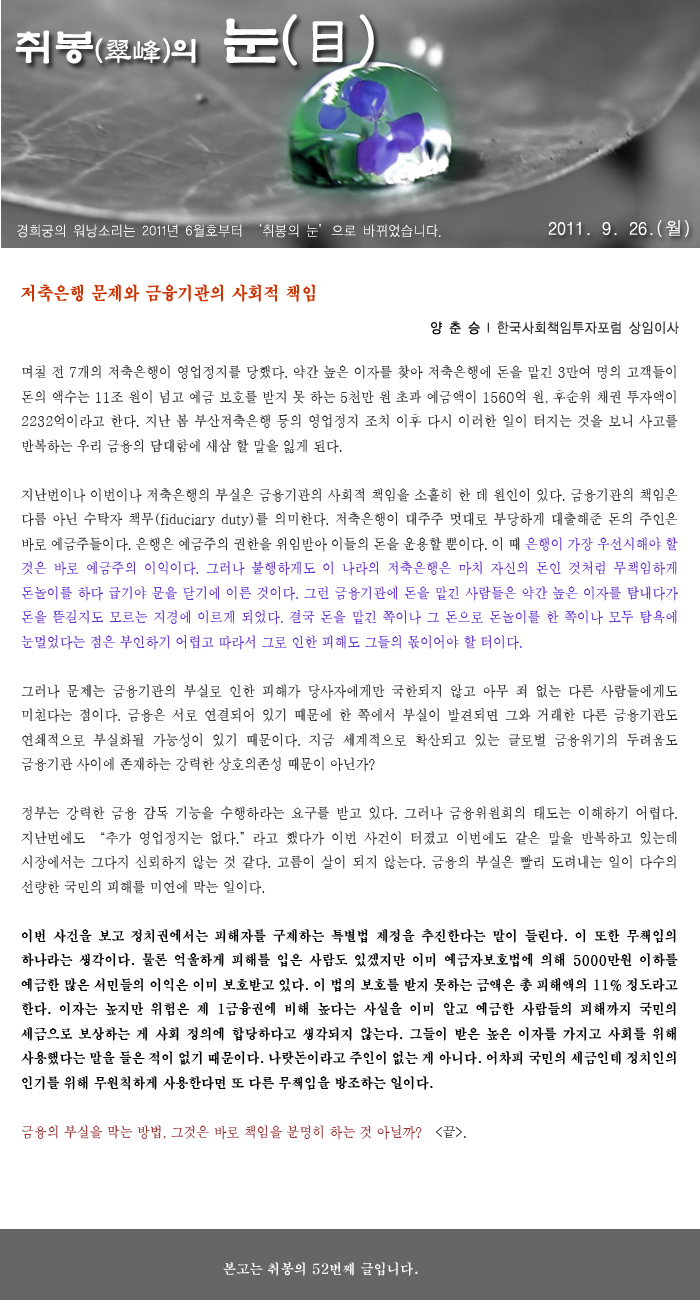
<style>
.page{position:relative;width:700px;height:1300px;background:#ffffff}
.page>*{position:absolute;margin:0}
.t1{font:28.6px "YetR-HM";color:#ffffff}
.t2{font:39.6px "YetR-HM";color:#ffffff}
.t3{font:57.3px "YetR-HM";color:#ffffff}
.t4{font:18px "DotumChe";color:#ffffff}
.t5{font:14px "YDIYGO110-KSCpc-EUC-H";color:#ffffff;scale:0.9 1}
.t6{font:18px "H2mjrE";color:#cc3300;scale:0.9 1}
.t7{font:14px "YDIYGO120-KSCpc-EUC-H";color:#333333;scale:0.9 1}
.t8{font:14px "YDIYGO120-KSCpc-EUC-H";color:#000000;scale:0.9 1}
.t9{font:14px "H2mjsM";color:#333333;scale:0.92 1}
.t10{font:14px "H2mjsM";color:#6633cc;scale:0.92 1}
.t11{font:14px "H2mjrE";color:#000000;scale:0.92 1}
.t12{font:14px "H2mjsM";color:#993333;scale:0.92 1}
.t13{font:14px "H2mjrE";color:#ffffff;scale:0.95 1}
</style>
<div class="page">
<p class="t1" style="left:15px;top:14px;width:359px;height:52px"><span class="t2">취봉</span>(翠峰)의  <span class="t3">눈(目)</span></p>
<p class="t4" style="left:548px;top:220px;width:141px;height:17px">2011. 9. 26.(월)</p>
<p class="t5" style="left:17px;top:223px;width:424px;height:15px">경희궁의 워낭소리는 2011년 6월호부터 ‘취봉의 눈’으로 바뀌었습니다.</p>
<p class="t6" style="left:21px;top:284px;width:294px;height:18px">저축은행 문제와 금융기관의 사회적 책임</p>
<p class="t7" style="left:431px;top:321px;width:248px;height:14px"><span class="t8">양 춘 승 </span>l 한국사회책임투자포럼 상임이사</p>
<p class="t9" style="left:21px;top:365px;width:657px;height:775px;text-align:justify">며칠 전 7개의 저축은행이 영업정지를 당했다. 약간 높은 이자를 찾아 저축은행에 돈을 맡긴 3만여 명의 고객들이 돈의 액수는 11조 원이 넘고 예금 보호를 받지 못 하는 5천만 원 초과 예금액이 1560억 원, 후순위 채권 투자액이 2232억이라고 한다. 지난 봄 부산저축은행 등의 영업정지 조치 이후 다시 이러한 일이 터지는 것을 보니 사고를 반복하는 우리 금융의 담대함에 새삼 할 말을 잃게 된다.<br><br>지난번이나 이번이나 저축은행의 부실은 금융기관의 사회적 책임을 소홀히 한 데 원인이 있다. 금융기관의 책임은 다름 아닌 수탁자 책무(fiduciary duty)를 의미한다. 저축은행이 대주주 멋대로 부당하게 대출해준 돈의 주인은 바로 예금주들이다. 은행은 예금주의 권한을 위임받아 이들의 돈을 운용할 뿐이다. 이 때 <span class="t10">은행이 가장 우선시해야 할 것은 바로 예금주의 이익이다. 그러나 불행하게도 이 나라의 저축은행은 마치 자신의 돈인 것처럼 무책임하게 돈놀이를 하다 급기야 문을 닫기에 이른 것이다. 그런 금융기관에 돈을 맡긴 사람들은 약간 높은 이자를 탐내다가 돈을 뜯길지도 모르는 지경에 이르게 되었다. 결국 돈을 맡긴 쪽이나 그 돈으로 돈놀이를 한 쪽이나 모두 탐욕에 눈멀었다는 점은 부인하기 어렵고 따라서 그로 인한 피해도 그들의 몫이어야 할 터이다.<br></span><br>그러나 문제는 금융기관의 부실로 인한 피해가 당사자에게만 국한되지 않고 아무 죄 없는 다른 사람들에게도 미친다는 점이다. 금융은 서로 연결되어 있기 때문에 한 쪽에서 부실이 발견되면 그와 거래한 다른 금융기관도 연쇄적으로 부실화될 가능성이 있기 때문이다. 지금 세계적으로 확산되고 있는 글로벌 금융위기의 두려움도 금융기관 사이에 존재하는 강력한 상호의존성 때문이 아닌가?<br><br>정부는 강력한 금융 감독 기능을 수행하라는 요구를 받고 있다. 그러나 금융위원회의 태도는 이해하기 어렵다. 지난번에도 “추가 영업정지는 없다.”라고 했다가 이번 사건이 터졌고 이번에도 같은 말을 반복하고 있는데  시장에서는 그다지 신뢰하지 않는 것 같다. 고름이 살이 되지 않는다. 금융의 부실은 빨리 도려내는 일이 다수의 선량한 국민의 피해를 미연에 막는 일이다. <br><br><span class="t11">이번 사건을 보고 정치권에서는 피해자를 구제하는 특별법 제정을 추진한다는 말이 들린다. 이 또한 무책임의 하나라는 생각이다. 물론 억울하게 피해를 입은 사람도 있겠지만 이미 예금자보호법에 의해 5000만원 이하를 예금한 많은 서민들의 이익은 이미 보호받고 있다. 이 법의 보호를 받지 못하는 금액은 총 피해액의 11% 정도라고 한다. 이자는 높지만 위험은 제 1금융권에 비해 높다는 사실을 이미 알고 예금한 사람들의 피해까지 국민의 세금으로 보상하는 게 사회 정의에 합당하다고 생각되지 않는다. 그들이 받은 높은 이자를 가지고 사회를 위해 사용했다는 말을 들은 적이 없기 때문이다. 나랏돈이라고 주인이 없는 게 아니다. 어차피 국민의 세금인데 정치인의 인기를 위해 무원칙하게 사용한다면 또 다른 무책임을 방조하는 일이다.<br><br></span><span class="t12">금융의 부실을 막는 방법, 그것은 바로 책임을 분명히 하는 것 아닐까?</span>   &lt;끝&gt;.</p>
<p class="t13" style="left:223px;top:1262px;width:195px;height:14px">본고는 취봉의 52번째 글입니다.</p>
</div>
